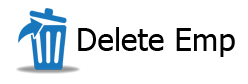
<style>
.page{position:relative;width:248px;height:84px;background:#ffffff}
.page>*{position:absolute;margin:0}
.t1{font:31.4px "Tahoma";color:#000000}
</style>
<div class="page">
<p class="t1" style="left:78px;top:27px;width:157px;height:30px">Delete Emp</p>
</div>
